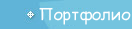
<style>
.page{position:relative;width:132px;height:29px;background:#74c4df}
.page>*{position:absolute;margin:0}
.t1{font:16px "ComicSansMS";color:#ffffff}
</style>
<div class="page">
<p class="t1" style="left:39px;top:8px;width:92px;height:17px">Портфолио</p>
</div>
